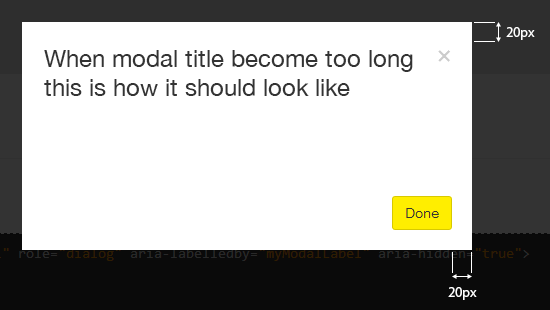
<style>
.page{position:relative;width:550px;height:310px;background:#ffffff}
.page>*{position:absolute;margin:0}
.t1{font:14px "MyriadPro-Regular";color:#ffffff}
.t2{font:24px "HelveticaNeue";color:#333333}
</style>
<div class="page">
<p class="t1" style="left:506px;top:27px;width:29px;height:13px">20px</p>
<p class="t2" style="left:44px;top:50px;width:369px;height:46px">When modal title become too long this is how it should look like</p>
<p class="t1" style="left:448px;top:287px;width:29px;height:13px">20px</p>
</div>
